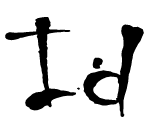
<style>
.page{position:relative;width:150px;height:130px;background:#ffffff}
.page>*{position:absolute;margin:0}
.t1{font:131.3px "Chiller-Regular";color:#000000;scale:1.09 1}
</style>
<div class="page">
<p class="t1" style="left:5px;top:17px;width:139px;height:100px">Id</p>
</div>
